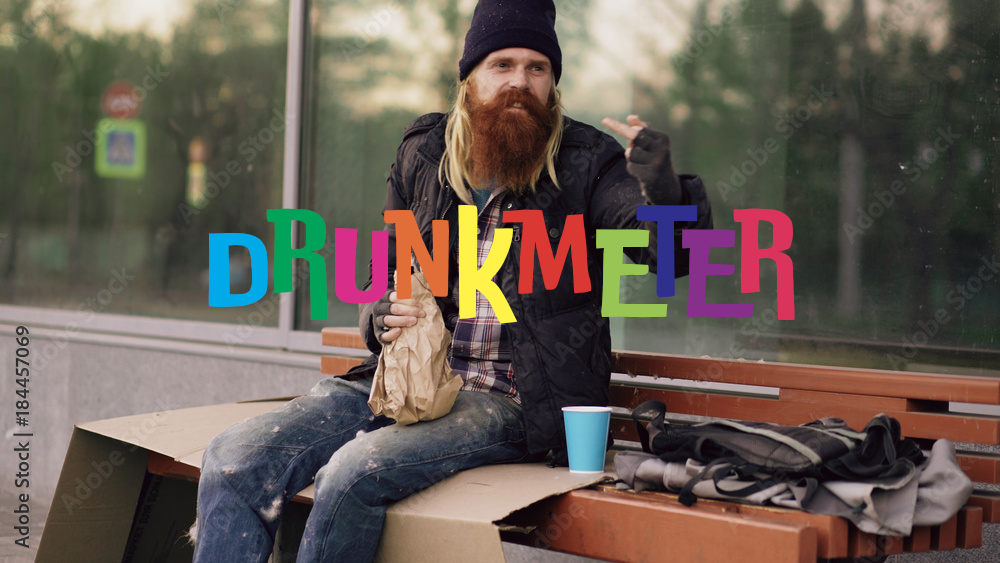
<style>
.page{position:relative;width:1000px;height:563px}
.page>*{position:absolute;margin:0}
.t1{font:117px "DoUbLeBaSs-Regular";color:#00aae9}
.t2{font:117px "DoUbLeBaSs-Regular";color:#00a359}
.t3{font:117px "DoUbLeBaSs-Regular";color:#d92d8a}
.t4{font:117px "DoUbLeBaSs-Regular";color:#e16e38}
.t5{font:117px "DoUbLeBaSs-Regular";color:#fff34a}
.t6{font:117px "DoUbLeBaSs-Regular";color:#da3832}
.t7{font:117px "DoUbLeBaSs-Regular";color:#99c555}
.t8{font:117px "DoUbLeBaSs-Regular";color:#2f308d}
.t9{font:117px "DoUbLeBaSs-Regular";color:#862f8b}
.t10{font:117px "DoUbLeBaSs-Regular";color:#da345d}
</style>
<div class="page">
<p class="t1" style="left:208px;top:205px;width:587px;height:119px">D<span class="t2">r</span><span class="t3">u</span><span class="t4">n</span><span class="t5">k</span><span class="t6">M</span><span class="t7">e</span><span class="t8">t</span><span class="t9">e</span><span class="t10">r</span></p>
</div>
